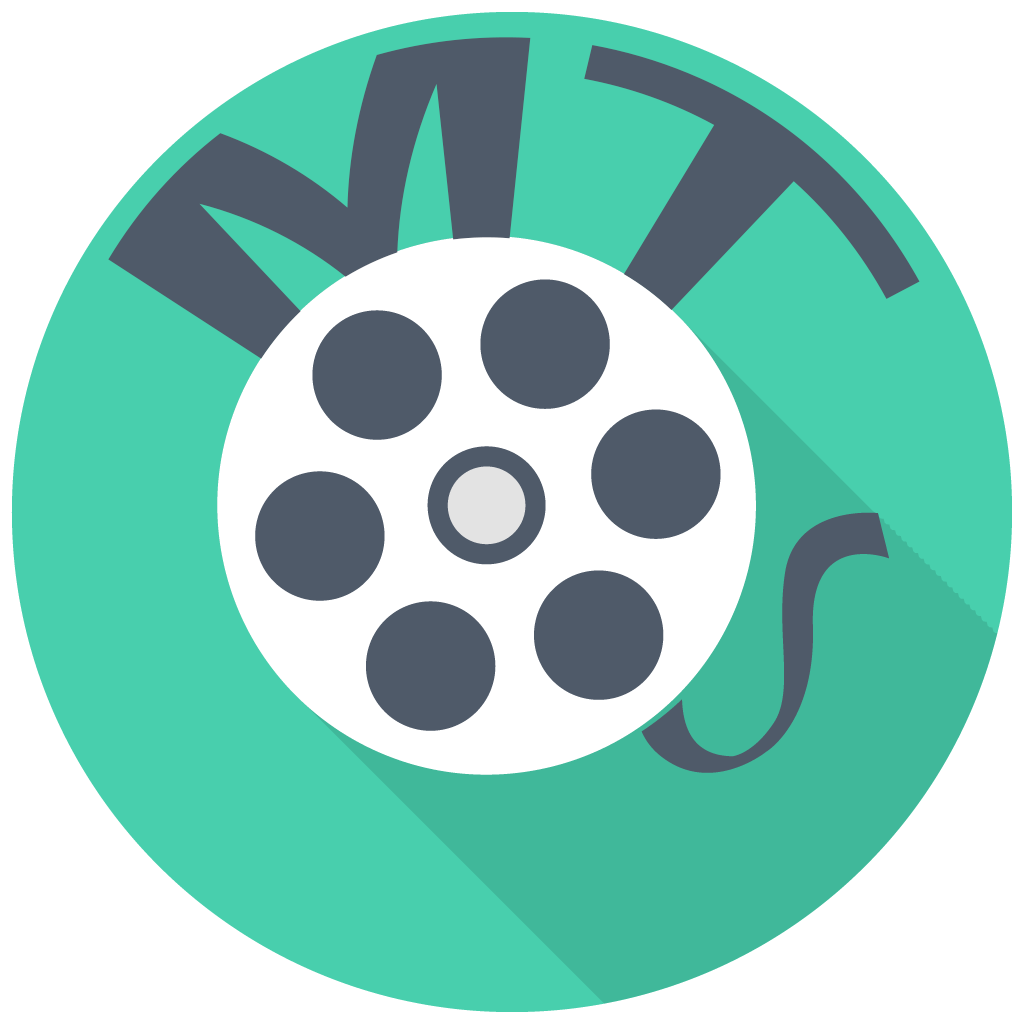
<style>
.page{position:relative;width:1024px;height:1024px;background:#ffffff}
.page>*{position:absolute;margin:0}
.t1{font:280px "ArialNarrow-Bold";color:#4f5a69}
</style>
<div class="page">
<p class="t1" style="left:108px;top:37px;width:812px;height:322px">MT</p>
</div>
